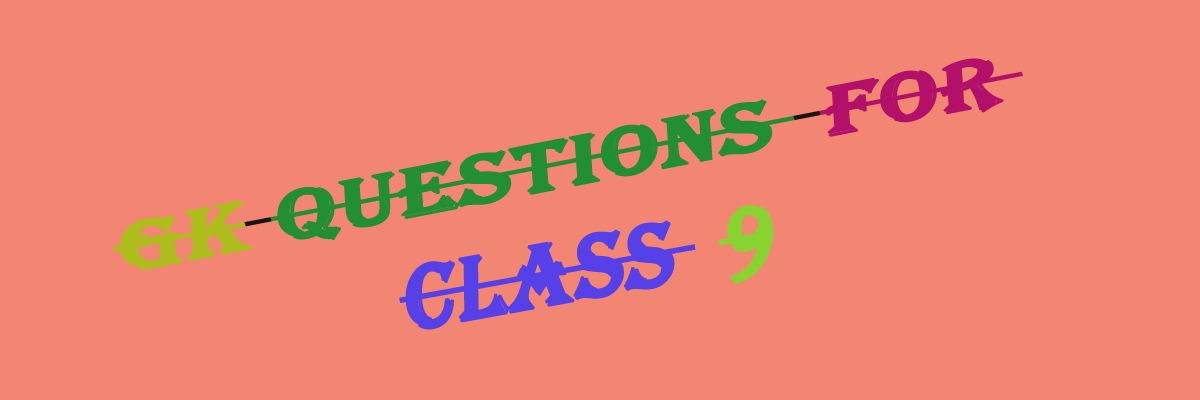
<style>
.page{position:relative;width:1200px;height:400px;background:#f38672}
.page>*{position:absolute;margin:0}
.t1{font:123.1px "Algerian";color:#229032;text-transform:uppercase;font-weight:bold;font-style:italic;scale:1.32 1}
.t2{font:123.1px "Algerian";color:#acbd1c;text-transform:uppercase;font-weight:bold;font-style:italic;scale:1.32 1}
.t3{font:123.1px "Algerian";color:#b31169;text-transform:uppercase;font-weight:bold;font-style:italic;scale:1.32 1}
.t4{font:157.9px "Algerian";color:#5541e7;text-transform:uppercase;font-weight:bold;font-style:italic;scale:0.95 1}
.t5{font:157.9px "Algerian";color:#88d330;text-transform:uppercase;font-weight:bold;font-style:italic;scale:0.95 1}
</style>
<div class="page">
<p class="t1" style="left:113px;top:58px;width:910px;height:212px;rotate:-11deg"><span class="t2">gk </span>questions  <span class="t3">for</span></p>
<p class="t4" style="left:399px;top:205px;width:376px;height:125px;rotate:-10deg">class  <span class="t5">9</span></p>
</div>
